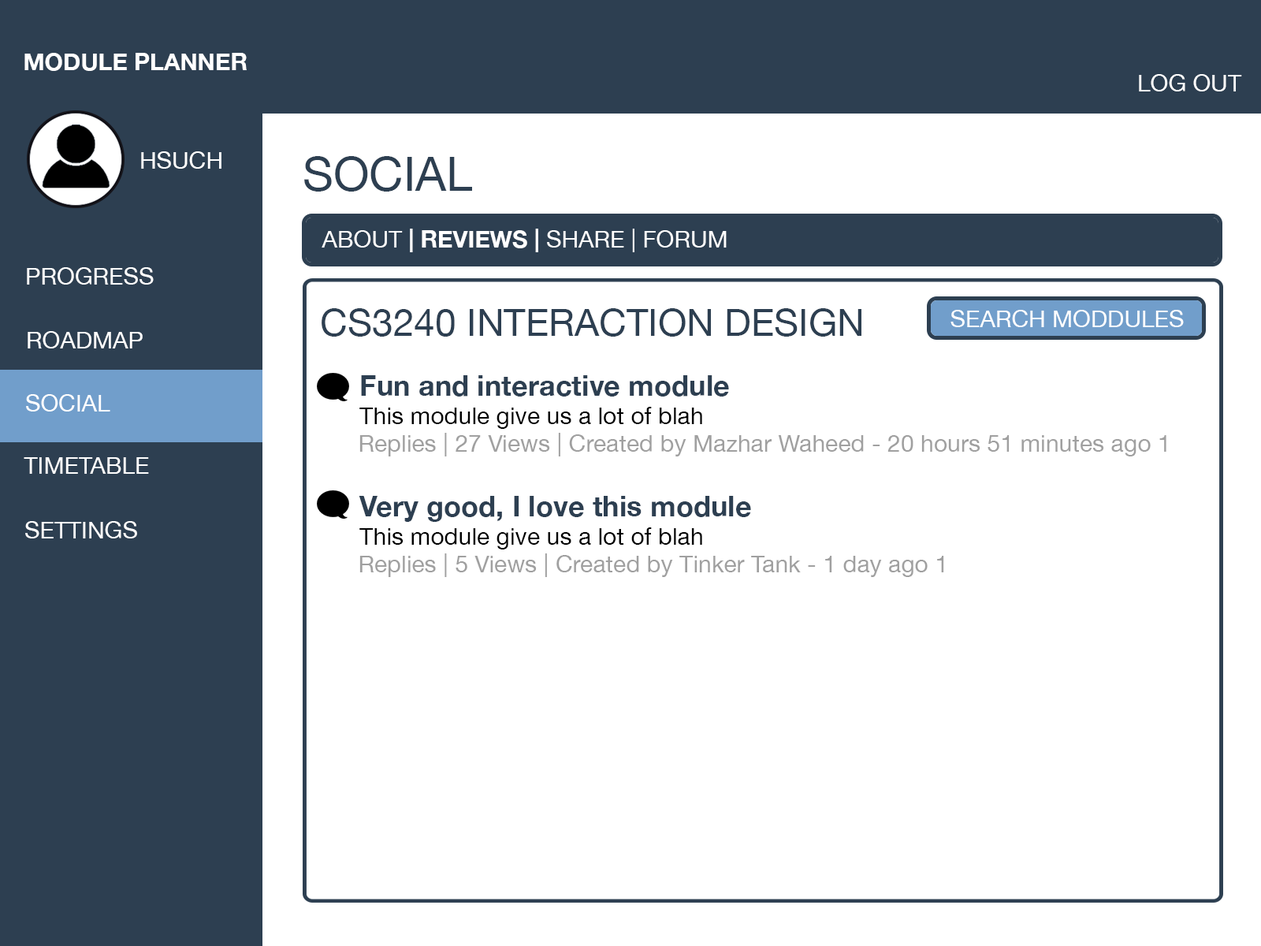
<style>
.page{position:relative;width:1261px;height:946px;background:#ffffff}
.page>*{position:absolute;margin:0}
.t1{font:23.6px "HelveticaNeue-Bold";color:#ffffff}
.t2{font:23.5px "HelveticaNeue";color:#ffffff}
.t3{font:47.3px "HelveticaNeue";color:#2d3f51}
.t4{font:23.5px "HelveticaNeue-Bold";color:#ffffff}
.t5{font:23.6px "HelveticaNeue";color:#ffffff}
.t6{font:37.8px "HelveticaNeue";color:#2d3f51}
.t7{font:23.6px "HelveticaNeue";color:#000000}
.t8{font:28.3px "HelveticaNeue-Bold";color:#2d3f51}
.t9{font:23.5px "HelveticaNeue";color:#a0a0a0}
</style>
<div class="page">
<p class="t1" style="left:24px;top:53px;width:223px;height:18px">MODULE PLANNER</p>
<p class="t2" style="left:1139px;top:74px;width:103px;height:17px">LOG OUT</p>
<p class="t2" style="left:141px;top:151px;width:80px;height:18px">HSUCH</p>
<p class="t3" style="left:304px;top:156px;width:168px;height:36px">SOCIAL</p>
<p class="t2" style="left:322px;top:229px;width:405px;height:23px">ABOUT<span class="t4"> | REVIEWS | </span>SHARE | FORUM</p>
<p class="t5" style="left:27px;top:267px;width:127px;height:17px">PROGRESS</p>
<p class="t6" style="left:322px;top:308px;width:539px;height:29px">CS3240 INTERACTION DESIGN</p>
<p class="t2" style="left:950px;top:310px;width:234px;height:17px">SEARCH MODDULES</p>
<p class="t5" style="left:28px;top:331px;width:115px;height:17px">ROADMAP</p>
<p class="t7" style="left:359px;top:375px;width:370px;height:54px;text-align:right"><span class="t8">Fun and interactive module<br></span>This module give us a lot of blah</p>
<p class="t5" style="left:26px;top:394px;width:84px;height:17px">SOCIAL</p>
<p class="t9" style="left:359px;top:433px;width:807px;height:23px">1 Replies | 27 Views | Created by Mazhar Waheed - 20 hours 51 minutes ago</p>
<p class="t5" style="left:24px;top:457px;width:125px;height:17px">TIMETABLE</p>
<p class="t7" style="left:359px;top:496px;width:392px;height:53px;text-align:right"><span class="t8">Very good, I love this module<br></span>This module give us a lot of blah</p>
<p class="t5" style="left:25px;top:521px;width:112px;height:17px">SETTINGS</p>
<p class="t9" style="left:359px;top:553px;width:585px;height:24px">1 Replies | 5 Views | Created by Tinker Tank - 1 day ago</p>
</div>
